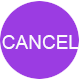
<style>
.page{position:relative;width:80px;height:80px;background:#9b3ce2}
.page>*{position:absolute;margin:0}
.t1{font:19px "ArialMT";color:#faf9fb}
</style>
<div class="page">
<p class="t1" style="left:2px;top:35px;width:77px;height:14px">CANCEL</p>
</div>
